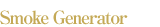
<style>
.page{position:relative;width:160px;height:27px;background:#ffffff}
.page>*{position:absolute;margin:0}
.t1{font:18px "RyuminPro-ExBold";letter-spacing:-0.08em;color:#c4a956}
</style>
<div class="page">
<p class="t1" style="left:0px;top:10px;width:128px;height:15px">Smoke Generator</p>
</div>
